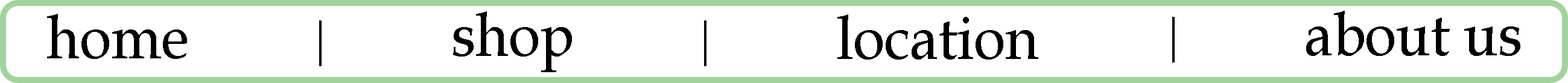
<style>
.page{position:relative;width:1568px;height:83px;background:#ffffff}
.page>*{position:absolute;margin:0}
.t1{font:61.6px "BookAntiqua";color:#000000;scale:0.93 1}
</style>
<div class="page">
<p class="t1" style="left:47px;top:14px;width:140px;height:45px">home</p>
<p class="t1" style="left:453px;top:11px;width:119px;height:61px">shop</p>
<p class="t1" style="left:837px;top:14px;width:201px;height:46px">location</p>
<p class="t1" style="left:1306px;top:11px;width:214px;height:45px">about us</p>
</div>
